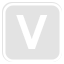
<style>
.page{position:relative;width:64px;height:64px;background:#e3e3e3}
.page>*{position:absolute;margin:0}
.t1{font:48px "CenturyGothic-Bold";color:#ffffff}
</style>
<div class="page">
<p class="t1" style="left:16px;top:15px;width:32px;height:34px">V</p>
</div>
